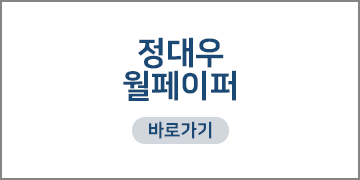
<style>
.page{position:relative;width:360px;height:180px;background:#ffffff}
.page>*{position:absolute;margin:0}
.t1{font:32px/33px "NanumSquareEB";color:#1a4975}
.t2{font:18px "NanumSquareEB";color:#1a4975}
</style>
<div class="page">
<p class="t1" style="left:123px;top:37px;width:113px;height:64px;text-align:center">정대우<br>월페이퍼</p>
<p class="t2" style="left:149px;top:121px;width:63px;height:18px">바로가기</p>
</div>
